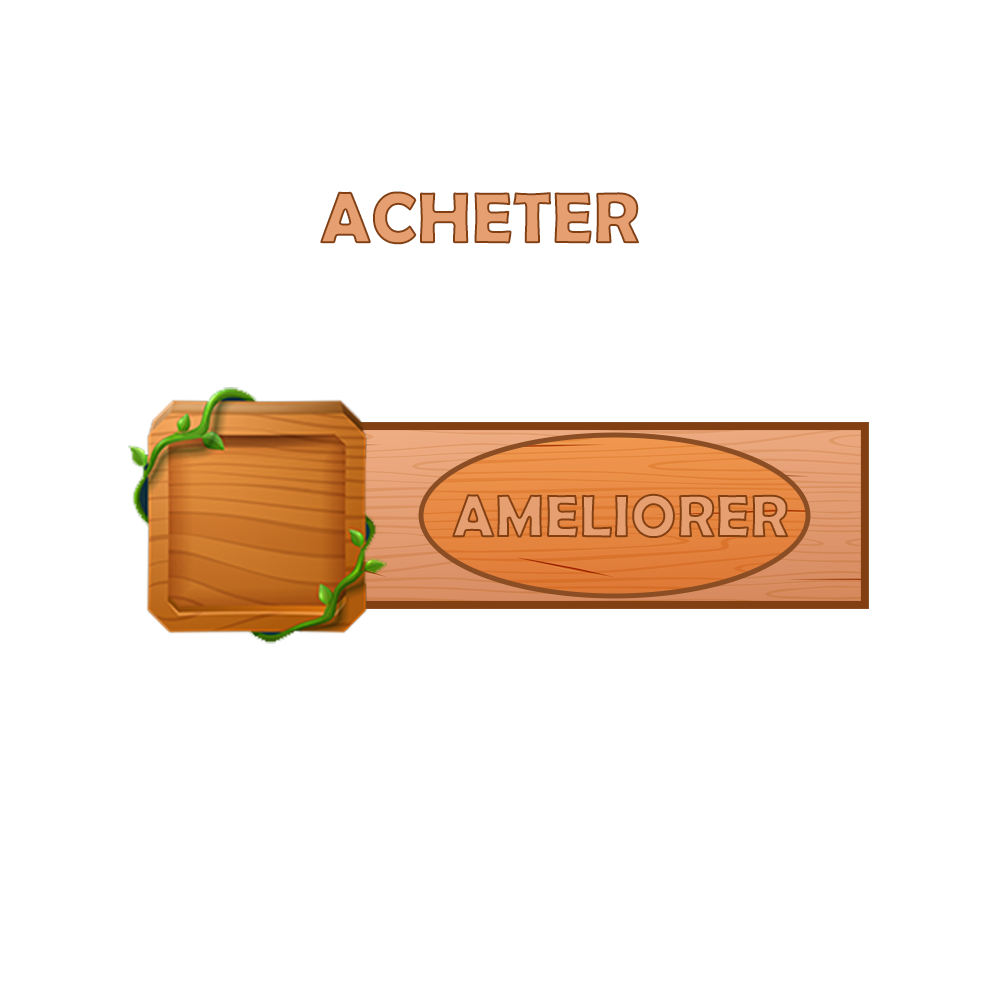
<style>
.page{position:relative;width:1000px;height:1000px;background:#ffffff}
.page>*{position:absolute;margin:0}
.t1{font:73.3px "BerlinSansFBDemi-Bold";color:#e5a072}
.t2{font:61px "BerlinSansFBDemi-Bold";color:#e5a072}
</style>
<div class="page">
<p class="t1" style="left:320px;top:191px;width:319px;height:54px">ACHETER</p>
<p class="t2" style="left:452px;top:493px;width:337px;height:45px">AMELIORER</p>
</div>
